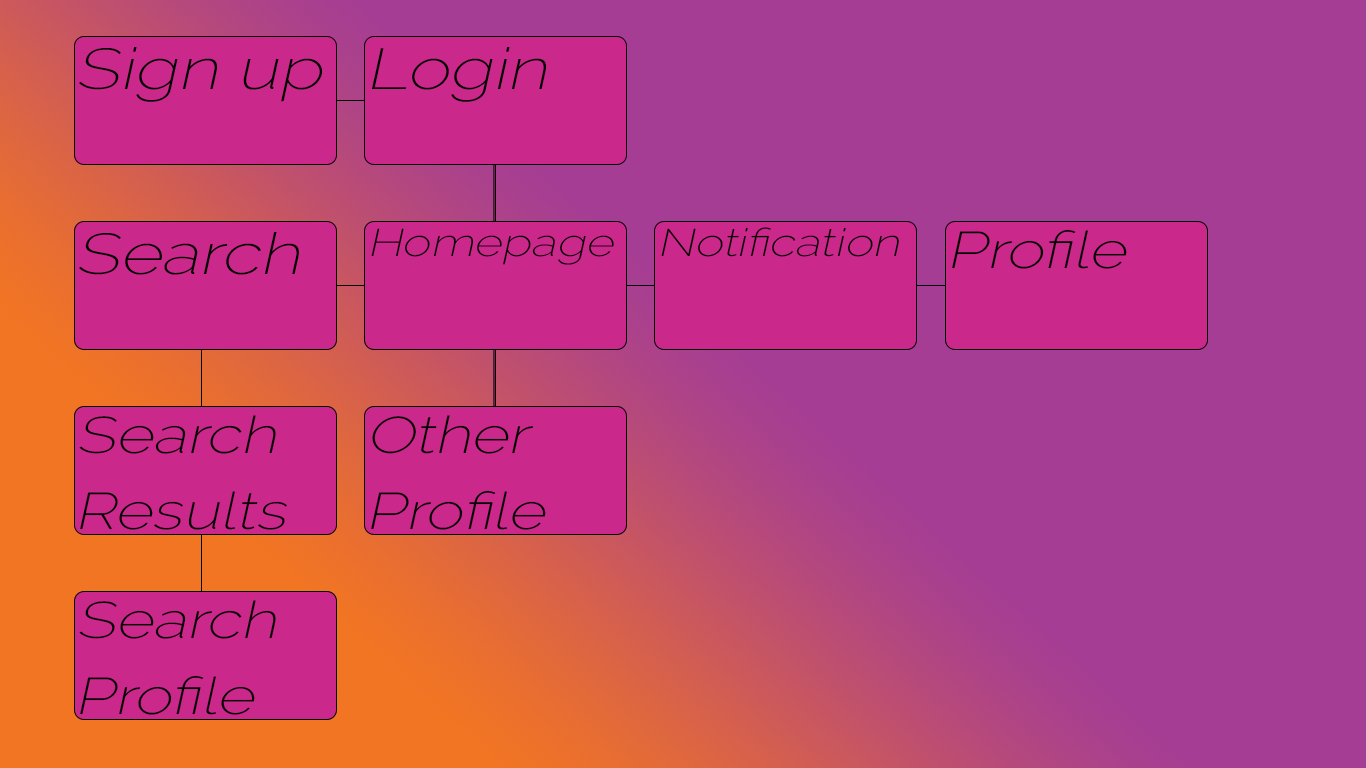
<style>
.page{position:relative;width:1366px;height:768px;background:#a53d94}
.page>*{position:absolute;margin:0}
.t1{font:57.6px "Raleway-ExtraLight";color:#000000;font-style:italic;scale:1.25 1}
.t2{font:38.4px "Raleway-ExtraLight";color:#000000;font-style:italic;scale:1.25 1}
.t3{font:51.2px "Raleway-ExtraLight";color:#000000;font-style:italic;scale:1.25 1}
</style>
<div class="page">
<p class="t1" style="left:79px;top:47px;width:243px;height:55px">Sign up</p>
<p class="t1" style="left:372px;top:47px;width:174px;height:55px">Login</p>
<p class="t1" style="left:79px;top:232px;width:220px;height:43px">Search</p>
<p class="t2" style="left:371px;top:228px;width:243px;height:37px">Homepage</p>
<p class="t2" style="left:661px;top:227px;width:238px;height:30px">Notification</p>
<p class="t3" style="left:952px;top:229px;width:175px;height:40px">Profile</p>
<p class="t3" style="left:79px;top:415px;width:208px;height:115px">Search Results</p>
<p class="t3" style="left:371px;top:415px;width:175px;height:115px">Other Profile</p>
<p class="t3" style="left:79px;top:600px;width:197px;height:115px">Search Profile</p>
</div>
